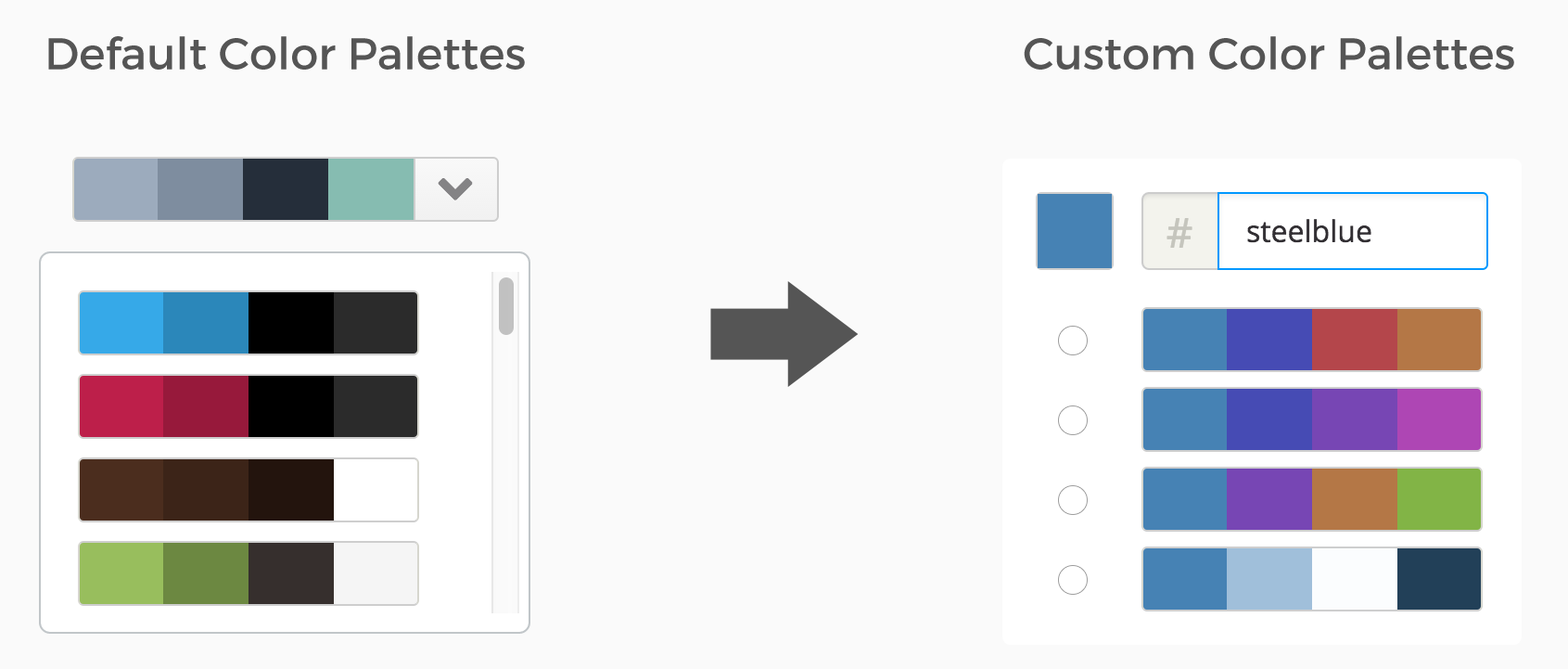
<style>
.page{position:relative;width:1568px;height:669px;background:#fafafa}
.page>*{position:absolute;margin:0}
.t1{font:44.5px "Montserrat-Regular";color:#555555}
</style>
<div class="page">
<p class="t1" style="left:48px;top:36px;width:477px;height:34px">Default Color Palettes</p>
<p class="t1" style="left:1024px;top:36px;width:490px;height:34px">Custom Color Palettes</p>
</div>
